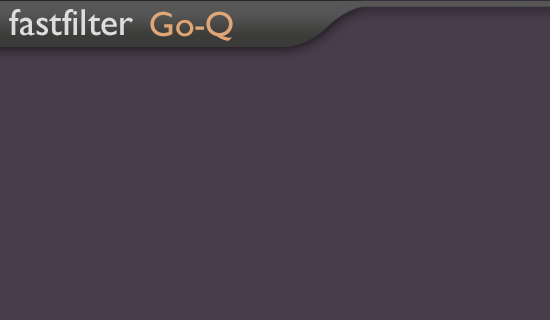
<style>
.page{position:relative;width:550px;height:320px;background:#473d4b}
.page>*{position:absolute;margin:0}
.t1{font:37.7px "GillSansMT";color:#dddddd}
.t2{font:35.1px "GillSansMT";color:#e0a676}
</style>
<div class="page">
<p class="t1" style="left:9px;top:9px;width:124px;height:27px">fastfilter</p>
<p class="t2" style="left:150px;top:11px;width:83px;height:30px">Go-Q</p>
</div>
